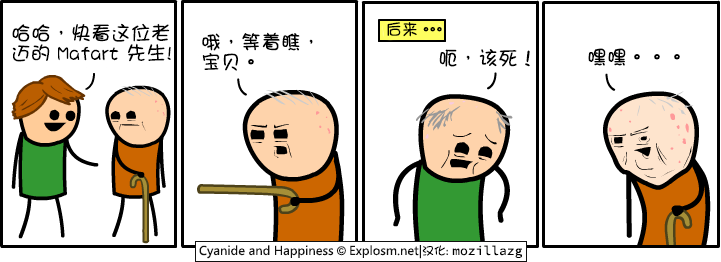
<style>
.page{position:relative;width:721px;height:262px;background:#ffffff}
.page>*{position:absolute;margin:0}
.t1{font:20px/20px "DFGirl";color:#000000}
.t2{font:16px "DFGirl";letter-spacing:-0.58em;color:#000000}
.t3{font:16px "DFGirl";color:#000000}
.t4{font:20px "DFGirl";color:#000000}
</style>
<div class="page">
<p class="t1" style="left:12px;top:23px;width:159px;height:39px">哈哈，快看这位老<br>迈的 Mafart 先生!</p>
<p class="t2" style="left:387px;top:22px;width:55px;height:15px"><span class="t3">后来</span>。。。</p>
<p class="t1" style="left:202px;top:32px;width:111px;height:39px">哦，等着瞧，<br>宝贝。</p>
<p class="t4" style="left:439px;top:49px;width:91px;height:18px">呃，该死！</p>
<p class="t4" style="left:588px;top:48px;width:92px;height:18px">嘿嘿。。。</p>
</div>
